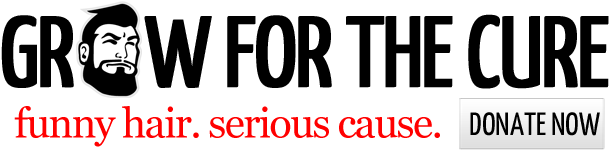
<style>
.page{position:relative;width:610px;height:152px;background:#ffffff}
.page>*{position:absolute;margin:0}
.t1{font:100px "YanoneKaffeesatz-Regular";letter-spacing:-0.04em;color:#000000;text-transform:uppercase;font-weight:bold}
.t2{font:41.9px "Georgia";letter-spacing:-0.04em;color:#ff0000}
.t3{font:32.1px "YanoneKaffeesatz-Regular";color:#000000;text-transform:uppercase}
</style>
<div class="page">
<p class="t1" style="left:1px;top:14px;width:608px;height:75px">gr     w for the cure</p>
<p class="t2" style="left:14px;top:106px;width:426px;height:41px">funny hair. serious cause.</p>
<p class="t3" style="left:470px;top:112px;width:130px;height:24px">donate now</p>
</div>
